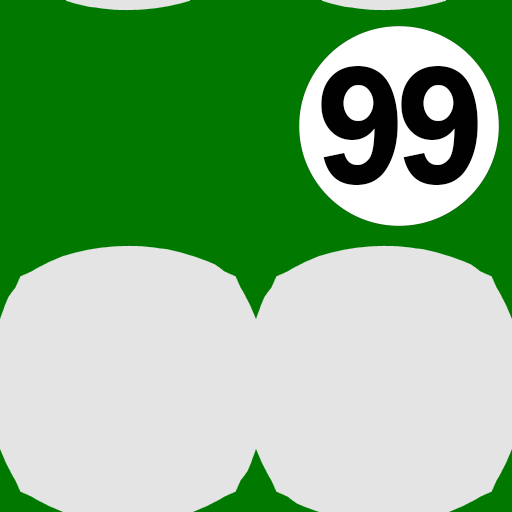
<style>
.page{position:relative;width:512px;height:512px;background:#e4e4e4}
.page>*{position:absolute;margin:0}
.t1{font:172.5px "FranklinGothic-Demi";letter-spacing:-0.05em;color:#010101;scale:0.87 1}
</style>
<div class="page">
<p class="t1" style="left:321px;top:66px;width:157px;height:119px">99</p>
</div>
